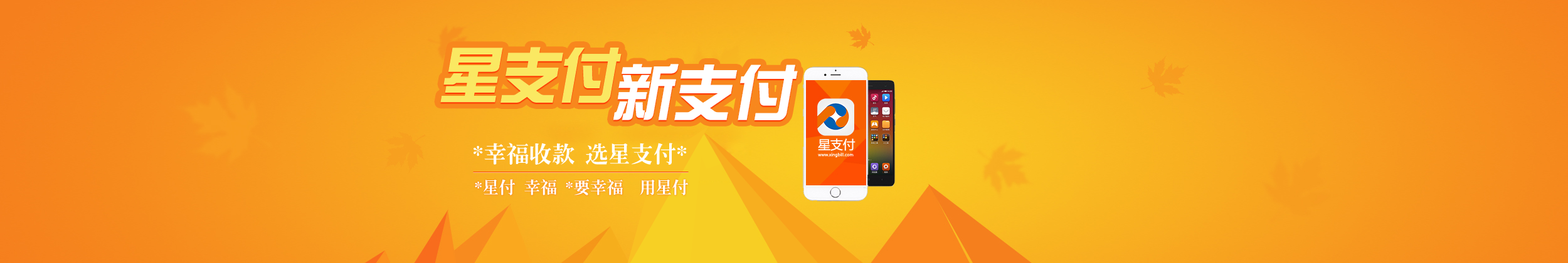
<style>
.page{position:relative;width:1568px;height:263px}
.page>*{position:absolute;margin:0}
.t1{font:61.5px "DFZongYi-Bd-80-Win-GB";color:#fae862;font-style:italic}
.t2{font:61.5px "DFZongYi-Bd-80-Win-GB";color:#ffffff;font-style:italic}
.t3{font:22.7px "CTLaoSongSJ";color:#ffffff}
.t4{font:12.5px "MicrosoftYaHei";color:#ffffff}
.t5{font:4.2px "MicrosoftYaHei";color:#ffffff}
.t6{font:16.6px "CTLaoSongSJ";color:#ffffff}
</style>
<div class="page">
<p class="t1" style="left:440px;top:47px;width:182px;height:56px">星支付</p>
<p class="t1" style="left:440px;top:47px;width:182px;height:56px">星支付</p>
<p class="t2" style="left:613px;top:64px;width:185px;height:56px">新支付</p>
<p class="t2" style="left:613px;top:64px;width:185px;height:56px">新支付</p>
<p class="t3" style="left:474px;top:143px;width:213px;height:22px">*幸福收款 选星支付*</p>
<p class="t4" style="left:818px;top:139px;width:38px;height:12px">星支付</p>
<p class="t5" style="left:818px;top:153px;width:36px;height:5px">www.xingbill.com</p>
<p class="t6" style="left:475px;top:179px;width:213px;height:17px">*星付 幸福  *要幸福 用星付</p>
</div>
